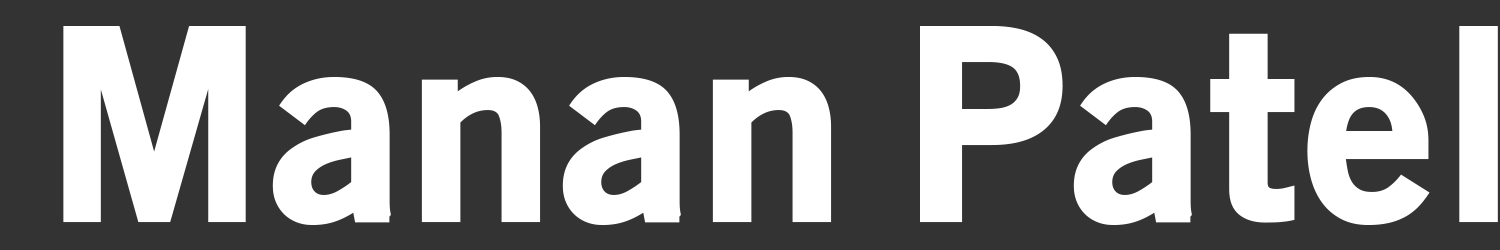
<style>
.page{position:relative;width:1500px;height:250px;background:#333333}
.page>*{position:absolute;margin:0}
.t1{font:262.5px "OldSansBlack";letter-spacing:0.025em;color:#ffffff}
</style>
<div class="page">
<p class="t1" style="left:63px;top:26px;width:1435px;height:199px">Manan Patel</p>
</div>
